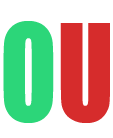
<style>
.page{position:relative;width:113px;height:138px;background:#ffffff}
.page>*{position:absolute;margin:0}
.t1{font:124.3px "Impact";color:#2cd679;scale:0.83 1}
.t2{font:124.3px "Impact";color:#d62c2c;scale:0.83 1}
</style>
<div class="page">
<p class="t1" style="left:3px;top:21px;width:107px;height:102px">O<span class="t2">U</span></p>
</div>
